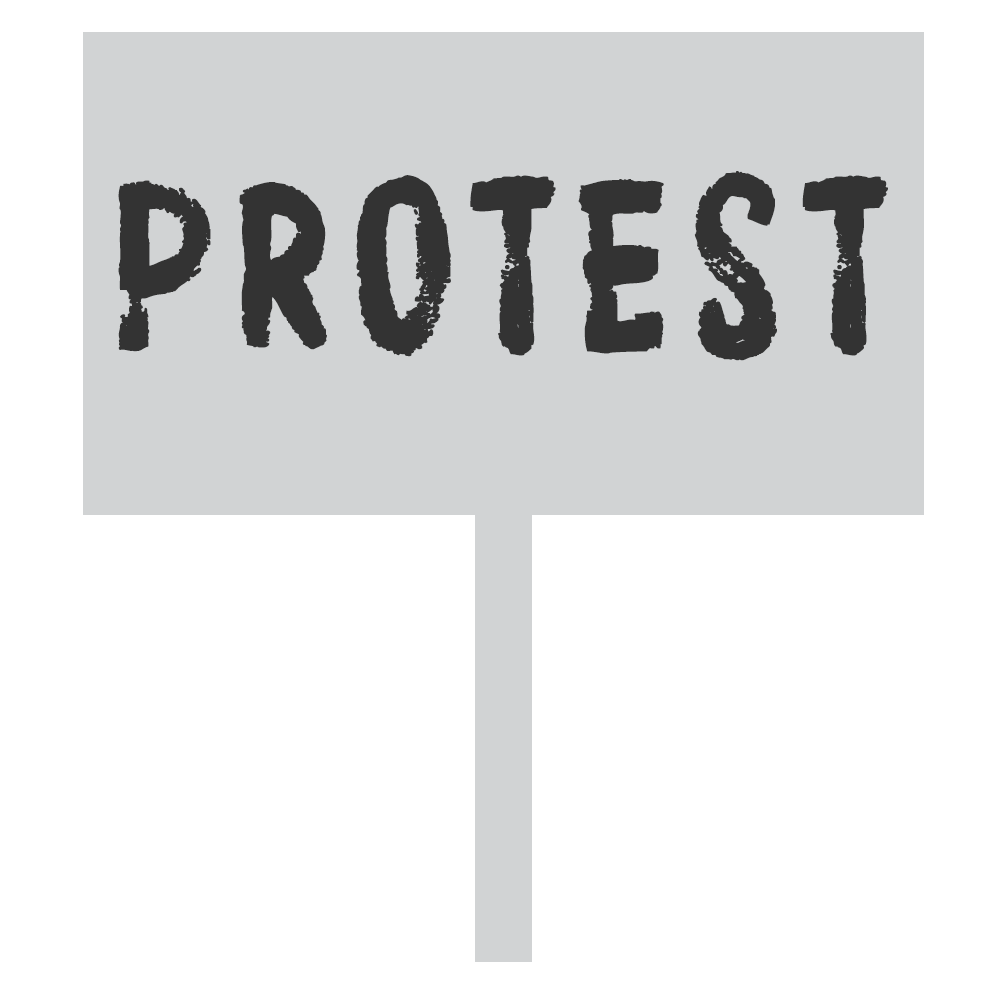
<style>
.page{position:relative;width:1000px;height:1000px;background:#ffffff}
.page>*{position:absolute;margin:0}
.t1{font:280px "ProtestPaintBB";letter-spacing:0.05em;color:#333333;font-weight:bold}
</style>
<div class="page">
<p class="t1" style="left:118px;top:171px;width:770px;height:190px">PROTEST</p>
</div>
